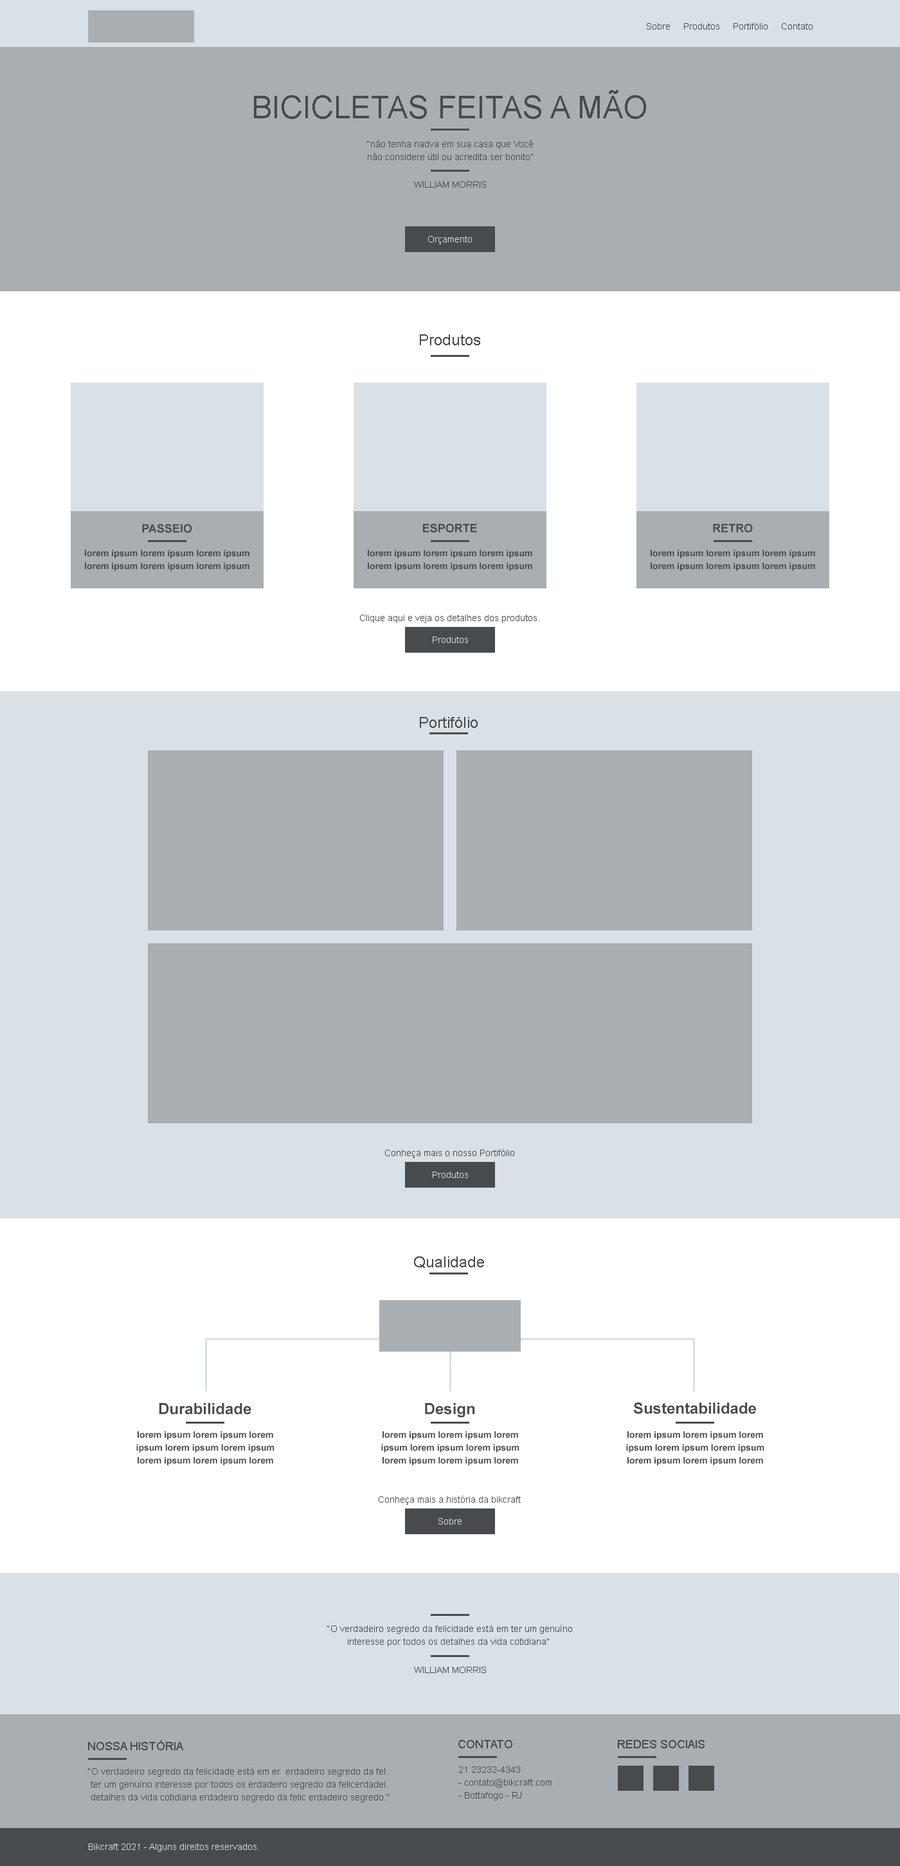
<style>
.page{position:relative;width:900px;height:1866px;background:#ffffff}
.page>*{position:absolute;margin:0}
.t1{font:9px "ArialMT";color:#484b4d}
.t2{font:30.9px "ArialMT";color:#484b4d;text-transform:uppercase}
.t3{font:9px/12.9px "ArialMT";color:#484b4d}
.t4{font:9px "ArialMT";color:#d9e0e6}
.t5{font:15.4px "ArialMT";color:#484b4d}
.t6{font:11.6px "Arial-BoldMT";color:#484b4d}
.t7{font:15.4px "Arial-BoldMT";color:#484b4d}
.t8{font:9px/12.9px "Arial-BoldMT";color:#484b4d}
.t9{font:11.6px "ArialMT";color:#484b4d}
</style>
<div class="page">
<p class="t1" style="left:647px;top:22px;width:166px;height:8px">Sobre     Produtos     Portifólio     Contato</p>
<p class="t2" style="left:254px;top:90px;width:392px;height:29px">Bicicletas Feitas a Mão</p>
<p class="t3" style="left:367px;top:140px;width:166px;height:20px">“não tenha nadva em sua casa que Você<br>não considere útil ou acredita ser bonito”</p>
<p class="t1" style="left:414px;top:181px;width:72px;height:7px">WILLIAM MORRIS</p>
<p class="t4" style="left:428px;top:236px;width:44px;height:8px">Orçamento</p>
<p class="t5" style="left:420px;top:334px;width:60px;height:11px">Produtos</p>
<p class="t6" style="left:142px;top:524px;width:50px;height:9px"><span class="t7"> </span>PASSEIO</p>
<p class="t6" style="left:423px;top:523px;width:54px;height:9px">ESPORTE</p>
<p class="t6" style="left:713px;top:523px;width:40px;height:9px">RETRO</p>
<p class="t8" style="left:85px;top:550px;width:164px;height:21px;text-align:center">lorem ipsum lorem ipsum lorem ipsum lorem ipsum lorem ipsum lorem ipsum</p>
<p class="t8" style="left:368px;top:550px;width:164px;height:21px;text-align:center">lorem ipsum lorem ipsum lorem ipsum lorem ipsum lorem ipsum lorem ipsum</p>
<p class="t8" style="left:651px;top:550px;width:164px;height:21px;text-align:center">lorem ipsum lorem ipsum lorem ipsum lorem ipsum lorem ipsum lorem ipsum</p>
<p class="t1" style="left:360px;top:615px;width:179px;height:8px">Clique aqui e veja os detalhes dos produtos.</p>
<p class="t4" style="left:433px;top:636px;width:35px;height:7px">Produtos</p>
<p class="t5" style="left:420px;top:717px;width:58px;height:11px">Portifólio</p>
<p class="t1" style="left:385px;top:1149px;width:129px;height:9px">Conheça mais o nosso Portifólio</p>
<p class="t4" style="left:433px;top:1171px;width:35px;height:7px">Produtos</p>
<p class="t5" style="left:414px;top:1256px;width:70px;height:12px">Qualidade</p>
<p class="t7" style="left:159px;top:1403px;width:92px;height:11px">Durabilidade</p>
<p class="t7" style="left:425px;top:1403px;width:50px;height:15px">Design</p>
<p class="t7" style="left:633px;top:1402px;width:123px;height:12px">Sustentabilidade</p>
<p class="t8" style="left:136px;top:1431px;width:138px;height:34px;text-align:center">lorem ipsum lorem ipsum lorem ipsum lorem ipsum lorem ipsum lorem ipsum lorem ipsum lorem ipsumloremipsum</p>
<p class="t8" style="left:381px;top:1431px;width:138px;height:34px;text-align:center">lorem ipsum lorem ipsum lorem ipsum lorem ipsum lorem ipsum lorem ipsum lorem ipsum lorem ipsumloremipsum</p>
<p class="t8" style="left:626px;top:1431px;width:138px;height:34px;text-align:center">lorem ipsum lorem ipsum lorem ipsum lorem ipsum lorem ipsum lorem ipsum lorem ipsum lorem ipsumloremipsum</p>
<p class="t1" style="left:379px;top:1495px;width:142px;height:9px">Conheça mais a história da bikcraft</p>
<p class="t4" style="left:438px;top:1518px;width:24px;height:6px">Sobre</p>
<p class="t3" style="left:327px;top:1625px;width:245px;height:21px;text-align:center">“O verdadeiro segredo da felicidade está em ter um genuíno<br>interesse por todos os detalhes da vida cotidiana”</p>
<p class="t1" style="left:414px;top:1666px;width:72px;height:7px">WILLIAM MORRIS</p>
<p class="t9" style="left:88px;top:1740px;width:95px;height:10px">NOSSA HISTÓRIA</p>
<p class="t9" style="left:458px;top:1740px;width:54px;height:8px">CONTATO</p>
<p class="t9" style="left:618px;top:1740px;width:87px;height:8px">REDES SOCIAIS</p>
<p class="t3" style="left:88px;top:1767px;width:301px;height:35px">“O verdadeiro segredo da felicidade está em er  erdadeiro segredo da fel.  <br> ter um genuíno interesse por todos os erdadeiro segredo da felicerdadei.<br> detalhes da vida cotidiana erdadeiro segredo da felic erdadeiro segredo.”</p>
<p class="t3" style="left:458px;top:1766px;width:94px;height:34px">21 23232-4343<br>- contato@bikcraft.com<br>- Bottafogo - RJ</p>
<p class="t4" style="left:89px;top:1843px;width:170px;height:8px">Bikcraft 2021 - Alguns direitos reservados.</p>
</div>
